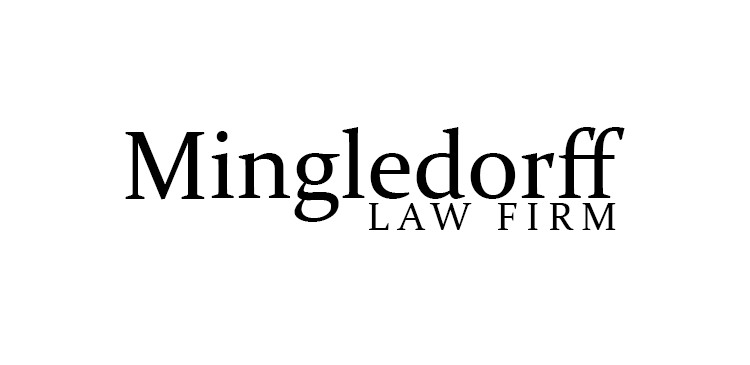
<style>
.page{position:relative;width:750px;height:365px;background:#ffffff}
.page>*{position:absolute;margin:0}
.t1{font:96px/80px "Constantia";color:#000000}
.t2{font:40px/32px "Constantia";letter-spacing:0.2em;color:#000000}
</style>
<div class="page">
<p class="t1" style="left:125px;top:127px;width:500px;height:103px;text-align:right">Mingledorff<br><span class="t2">LAW FIRM</span></p>
</div>
